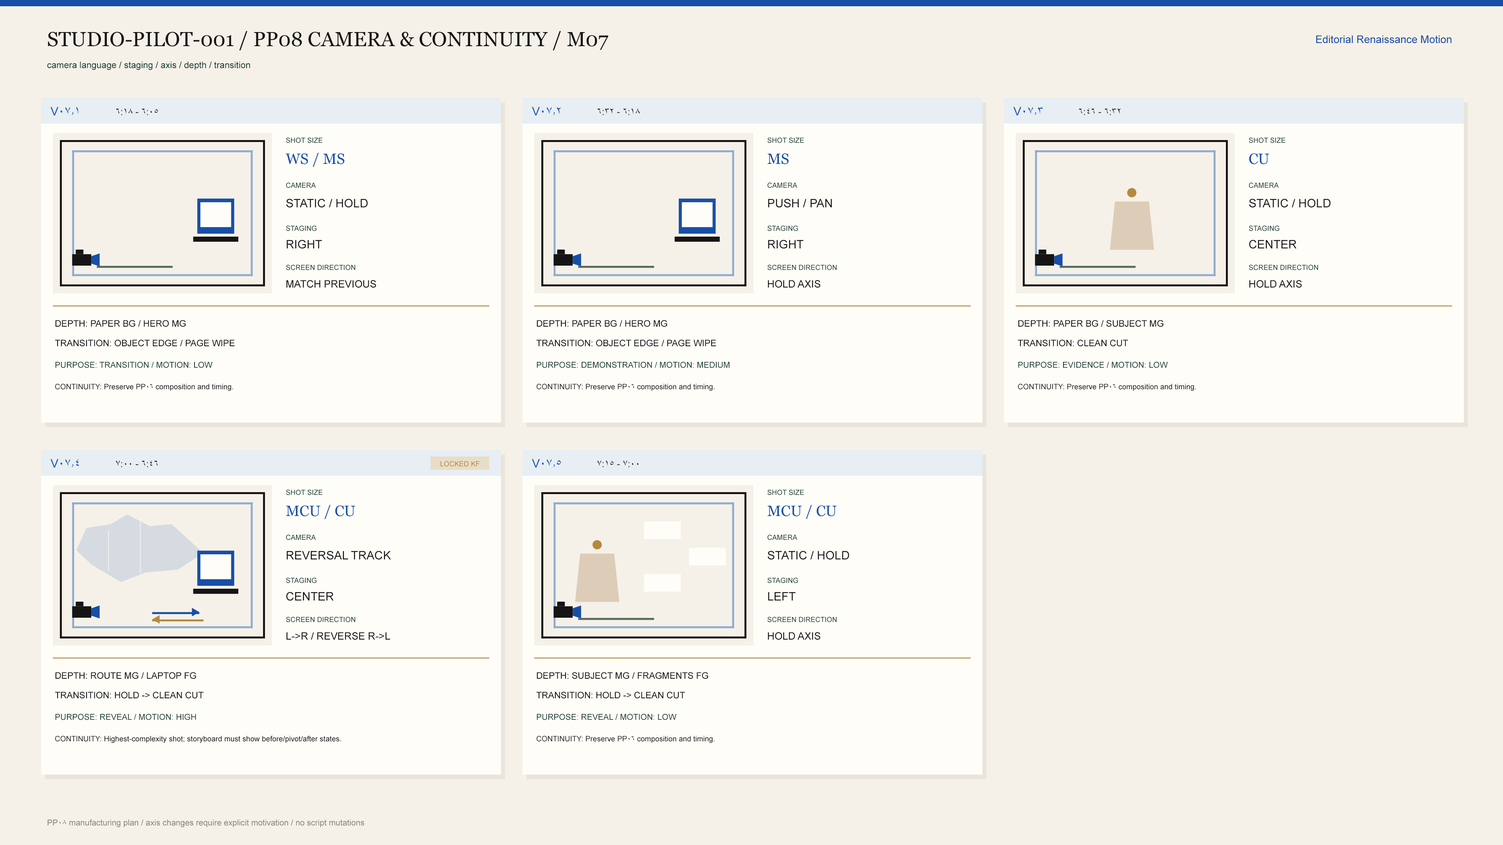
<style>
.page{position:relative;width:1503px;height:845px;background:#f6f1e8}
.page>*{position:absolute;margin:0}
.t1{font:20.3px "Georgia";color:#151515}
.t2{font:10.6px "ArialMT";color:#174fa6}
.t3{font:9px "ArialMT";color:#173c32}
.t4{font:11.7px "ArialMT";color:#174fa6}
.t5{font:9.4px "ArialMT";color:#151515}
.t6{font:7px "ArialMT";color:#173c32}
.t7{font:14.9px "Georgia";color:#174fa6}
.t8{font:21.5px "ArialMT";color:#b58a3e}
.t9{font:11.7px "ArialMT";color:#151515}
.t10{font:10.2px "ArialMT";color:#151515}
.t11{font:9px "ArialMT";color:#151515}
.t12{font:8.2px "ArialMT";color:#173c32}
.t13{font:7.4px "ArialMT";color:#151515}
.t14{font:7px "ArialMT";color:#b58a3e}
.t15{font:8.2px "ArialMT";color:#817f7a}
</style>
<div class="page">
<p class="t1" style="left:48px;top:31px;width:560px;height:19px">STUDIO-PILOT-001 / PP08 CAMERA &amp; CONTINUITY / M07</p>
<p class="t2" style="left:1316px;top:35px;width:135px;height:8px">Editorial Renaissance Motion</p>
<p class="t3" style="left:47px;top:61px;width:203px;height:9px">camera language / staging / axis / depth / transition</p>
<p class="t4" style="left:50px;top:107px;width:28px;height:8px">V07.1</p>
<p class="t5" style="left:116px;top:108px;width:42px;height:7px">6:05 - 6:18</p>
<p class="t4" style="left:532px;top:107px;width:28px;height:8px">V07.2</p>
<p class="t5" style="left:598px;top:108px;width:42px;height:7px">6:18 - 6:32</p>
<p class="t4" style="left:1013px;top:107px;width:29px;height:8px">V07.3</p>
<p class="t5" style="left:1079px;top:108px;width:41px;height:7px">6:32 - 6:46</p>
<p class="t6" style="left:286px;top:137px;width:36px;height:6px">SHOT SIZE</p>
<p class="t6" style="left:767px;top:137px;width:37px;height:6px">SHOT SIZE</p>
<p class="t6" style="left:1249px;top:137px;width:36px;height:6px">SHOT SIZE</p>
<p class="t7" style="left:286px;top:153px;width:58px;height:14px">WS / MS</p>
<p class="t7" style="left:767px;top:153px;width:21px;height:11px">MS</p>
<p class="t7" style="left:1249px;top:153px;width:20px;height:11px">CU</p>
<p class="t6" style="left:286px;top:182px;width:30px;height:6px">CAMERA</p>
<p class="t6" style="left:767px;top:182px;width:30px;height:6px">CAMERA</p>
<p class="t6" style="left:1249px;top:182px;width:29px;height:6px">CAMERA</p>
<p class="t8" style="left:1127px;top:188px;width:9px;height:10px">●</p>
<p class="t9" style="left:286px;top:199px;width:82px;height:9px">STATIC / HOLD</p>
<p class="t9" style="left:768px;top:199px;width:64px;height:9px">PUSH / PAN</p>
<p class="t9" style="left:1249px;top:199px;width:81px;height:9px">STATIC / HOLD</p>
<p class="t6" style="left:286px;top:225px;width:31px;height:6px">STAGING</p>
<p class="t6" style="left:767px;top:225px;width:31px;height:6px">STAGING</p>
<p class="t6" style="left:1249px;top:225px;width:30px;height:6px">STAGING</p>
<p class="t9" style="left:286px;top:240px;width:36px;height:9px">RIGHT</p>
<p class="t9" style="left:768px;top:240px;width:35px;height:9px">RIGHT</p>
<p class="t9" style="left:1249px;top:240px;width:47px;height:9px">CENTER</p>
<p class="t6" style="left:286px;top:265px;width:69px;height:5px">SCREEN DIRECTION</p>
<p class="t6" style="left:767px;top:265px;width:70px;height:5px">SCREEN DIRECTION</p>
<p class="t6" style="left:1249px;top:265px;width:69px;height:5px">SCREEN DIRECTION</p>
<p class="t10" style="left:286px;top:280px;width:90px;height:8px">MATCH PREVIOUS</p>
<p class="t10" style="left:768px;top:280px;width:52px;height:8px">HOLD AXIS</p>
<p class="t10" style="left:1249px;top:280px;width:52px;height:8px">HOLD AXIS</p>
<p class="t11" style="left:55px;top:320px;width:131px;height:7px">DEPTH: PAPER BG / HERO MG</p>
<p class="t11" style="left:536px;top:320px;width:131px;height:7px">DEPTH: PAPER BG / HERO MG</p>
<p class="t11" style="left:1018px;top:320px;width:145px;height:7px">DEPTH: PAPER BG / SUBJECT MG</p>
<p class="t11" style="left:55px;top:340px;width:180px;height:7px">TRANSITION: OBJECT EDGE / PAGE WIPE</p>
<p class="t11" style="left:536px;top:340px;width:180px;height:7px">TRANSITION: OBJECT EDGE / PAGE WIPE</p>
<p class="t11" style="left:1017px;top:340px;width:111px;height:7px">TRANSITION: CLEAN CUT</p>
<p class="t12" style="left:55px;top:362px;width:157px;height:6px">PURPOSE: TRANSITION / MOTION: LOW</p>
<p class="t12" style="left:536px;top:362px;width:193px;height:6px">PURPOSE: DEMONSTRATION / MOTION: MEDIUM</p>
<p class="t12" style="left:1018px;top:362px;width:150px;height:6px">PURPOSE: EVIDENCE / MOTION: LOW</p>
<p class="t13" style="left:55px;top:384px;width:178px;height:7px">CONTINUITY: Preserve PP06 composition and timing.</p>
<p class="t13" style="left:536px;top:384px;width:179px;height:7px">CONTINUITY: Preserve PP06 composition and timing.</p>
<p class="t13" style="left:1018px;top:384px;width:178px;height:7px">CONTINUITY: Preserve PP06 composition and timing.</p>
<p class="t4" style="left:50px;top:459px;width:29px;height:9px">V07.4</p>
<p class="t5" style="left:116px;top:460px;width:42px;height:7px">6:46 - 7:00</p>
<p class="t14" style="left:440px;top:461px;width:39px;height:6px">LOCKED KF</p>
<p class="t4" style="left:532px;top:459px;width:29px;height:9px">V07.5</p>
<p class="t5" style="left:597px;top:460px;width:42px;height:7px">7:00 - 7:15</p>
<p class="t6" style="left:286px;top:490px;width:36px;height:5px">SHOT SIZE</p>
<p class="t6" style="left:767px;top:490px;width:37px;height:5px">SHOT SIZE</p>
<p class="t7" style="left:286px;top:505px;width:69px;height:14px">MCU / CU</p>
<p class="t7" style="left:767px;top:505px;width:70px;height:14px">MCU / CU</p>
<p class="t6" style="left:286px;top:535px;width:30px;height:5px">CAMERA</p>
<p class="t8" style="left:592px;top:540px;width:10px;height:10px">●</p>
<p class="t6" style="left:767px;top:535px;width:30px;height:5px">CAMERA</p>
<p class="t9" style="left:286px;top:551px;width:105px;height:9px">REVERSAL TRACK</p>
<p class="t9" style="left:767px;top:551px;width:82px;height:9px">STATIC / HOLD</p>
<p class="t6" style="left:286px;top:578px;width:31px;height:5px">STAGING</p>
<p class="t6" style="left:767px;top:578px;width:31px;height:5px">STAGING</p>
<p class="t9" style="left:286px;top:592px;width:47px;height:9px">CENTER</p>
<p class="t9" style="left:768px;top:592px;width:28px;height:9px">LEFT</p>
<p class="t6" style="left:286px;top:617px;width:69px;height:6px">SCREEN DIRECTION</p>
<p class="t6" style="left:767px;top:617px;width:70px;height:6px">SCREEN DIRECTION</p>
<p class="t10" style="left:286px;top:632px;width:104px;height:8px">L-&gt;R / REVERSE R-&gt;L</p>
<p class="t10" style="left:768px;top:632px;width:52px;height:8px">HOLD AXIS</p>
<p class="t11" style="left:55px;top:672px;width:141px;height:7px">DEPTH: ROUTE MG / LAPTOP FG</p>
<p class="t11" style="left:536px;top:672px;width:172px;height:7px">DEPTH: SUBJECT MG / FRAGMENTS FG</p>
<p class="t11" style="left:55px;top:692px;width:148px;height:7px">TRANSITION: HOLD -&gt; CLEAN CUT</p>
<p class="t11" style="left:536px;top:692px;width:149px;height:7px">TRANSITION: HOLD -&gt; CLEAN CUT</p>
<p class="t12" style="left:55px;top:714px;width:141px;height:6px">PURPOSE: REVEAL / MOTION: HIGH</p>
<p class="t12" style="left:536px;top:714px;width:140px;height:6px">PURPOSE: REVEAL / MOTION: LOW</p>
<p class="t13" style="left:55px;top:736px;width:286px;height:7px">CONTINUITY: Highest-complexity shot; storyboard must show before/pivot/after states.</p>
<p class="t13" style="left:536px;top:736px;width:179px;height:7px">CONTINUITY: Preserve PP06 composition and timing.</p>
<p class="t15" style="left:47px;top:819px;width:317px;height:9px">PP08 manufacturing plan / axis changes require explicit motivation / no script mutations</p>
</div>
